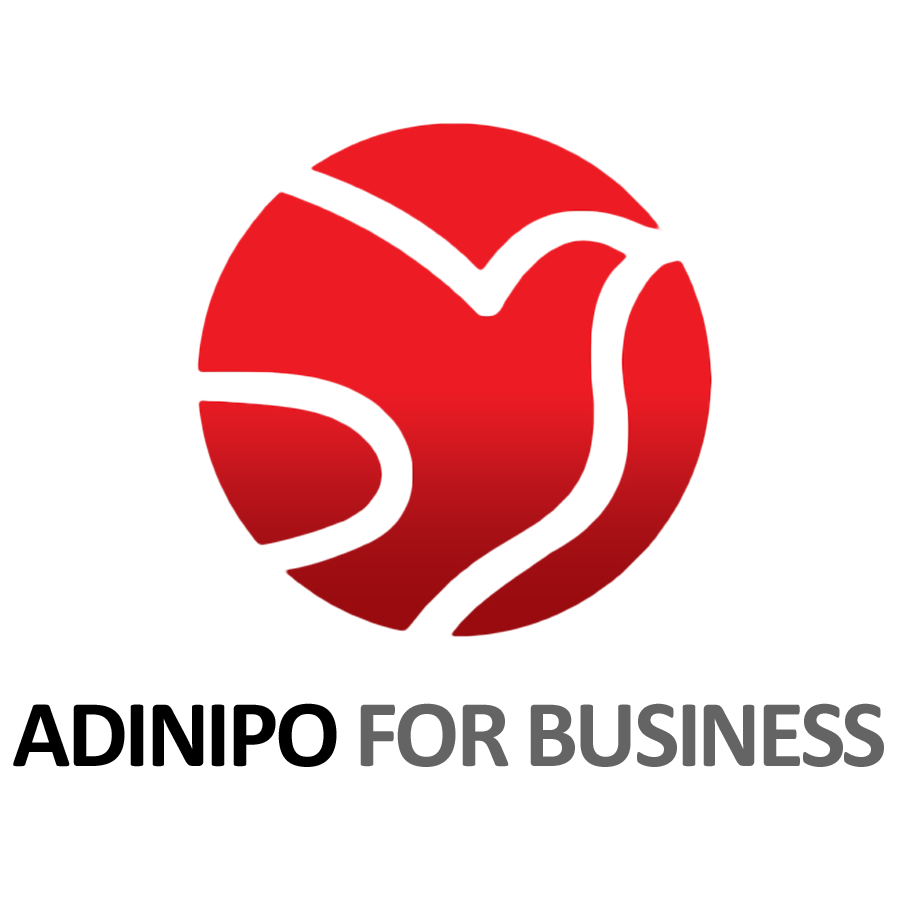
<style>
.page{position:relative;width:900px;height:900px;background:#ffffff}
.page>*{position:absolute;margin:0}
.t1{font:96.7px "Calibri-Bold";letter-spacing:-0.04em;color:#646464}
.t2{font:96.7px "Calibri-Bold";letter-spacing:-0.04em;color:#000000}
</style>
<div class="page">
<p class="t1" style="left:13px;top:703px;width:871px;height:64px"><span class="t2">ADINIPO </span>FOR BUSINESS</p>
</div>
